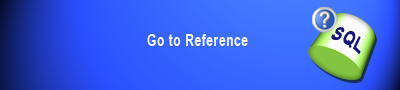
<style>
.page{position:relative;width:400px;height:90px}
.page>*{position:absolute;margin:0}
.t1{font:19.6px "Arial-BoldMT";letter-spacing:0.05em;color:#121777;scale:0.77 1}
.t2{font:15.6px "Arial-BoldMT";letter-spacing:0.05em;color:#f5f6f9;scale:0.77 1}
</style>
<div class="page">
<p class="t1" style="left:331px;top:27px;width:30px;height:28px;rotate:28deg">SQL</p>
<p class="t2" style="left:147px;top:34px;width:101px;height:12px">Go to Reference</p>
</div>
